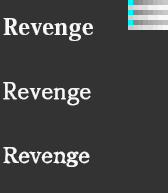
<style>
.page{position:relative;width:168px;height:193px;background:#333333}
.page>*{position:absolute;margin:0}
.t1{font:22px/64px "KozMinPro-Heavy";letter-spacing:0.022em;color:#f8f8f8}
.t2{font:22px/64px "AdobeFangsongStd-Regular";letter-spacing:0.028em;color:#f8f8f8;font-weight:bold}
.t3{font:22px/64px "ComicMysteryStd-DB";letter-spacing:-0.006em;color:#f8f8f8}
</style>
<div class="page">
<p class="t1" style="left:3px;top:18px;width:90px;height:149px">Revenge<br><span class="t2">Revenge<br></span><span class="t3">Revenge</span></p>
</div>
